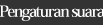
<style>
.page{position:relative;width:103px;height:25px;background:#333333}
.page>*{position:absolute;margin:0}
.t1{font:16px "HeiseiMinStd-W7";letter-spacing:-0.08em;color:#ffffff}
</style>
<div class="page">
<p class="t1" style="left:0px;top:5px;width:105px;height:16px">Pengaturan suara</p>
</div>
